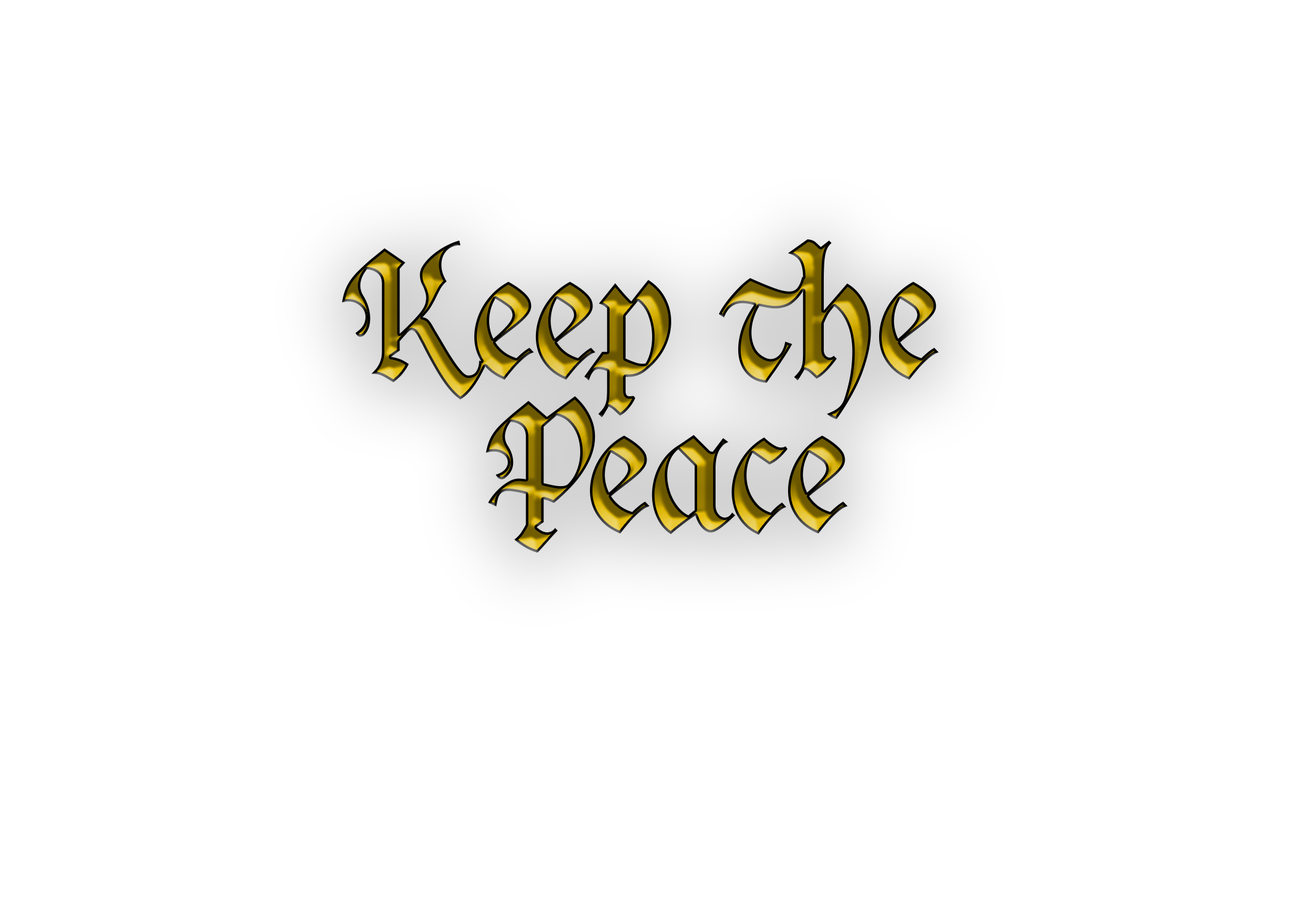
<style>
.page{position:relative;width:1292px;height:923px;background:#ffffff}
.page>*{position:absolute;margin:0}
.t1{font:184.6px/153.8px "JackPiratePERSONALUSEONLY"}
</style>
<div class="page">
<p class="t1" style="left:342px;top:239px;width:597px;height:314px;text-align:center">Keep the<br> Peace</p>
</div>
